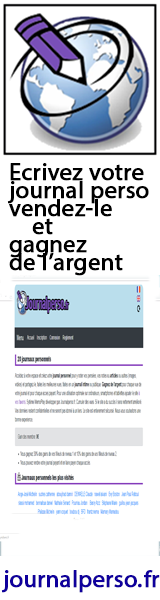
<style>
.page{position:relative;width:160px;height:600px;background:#ffffff}
.page>*{position:absolute;margin:0}
.t1{font:24px/18px "MyriadHebrew-Regular";color:#000000;font-weight:bold}
.t2{font:24px "MyriadHebrew-Regular";color:#0f009c;font-weight:bold}
</style>
<div class="page">
<p class="t1" style="left:7px;top:163px;width:142px;height:113px">Ecrivez votre<br>journal perso<br>vendez-le<br>    et<br>gagnez <br>de l’argent</p>
<p class="t2" style="left:1px;top:570px;width:159px;height:23px">journalperso.fr</p>
</div>
